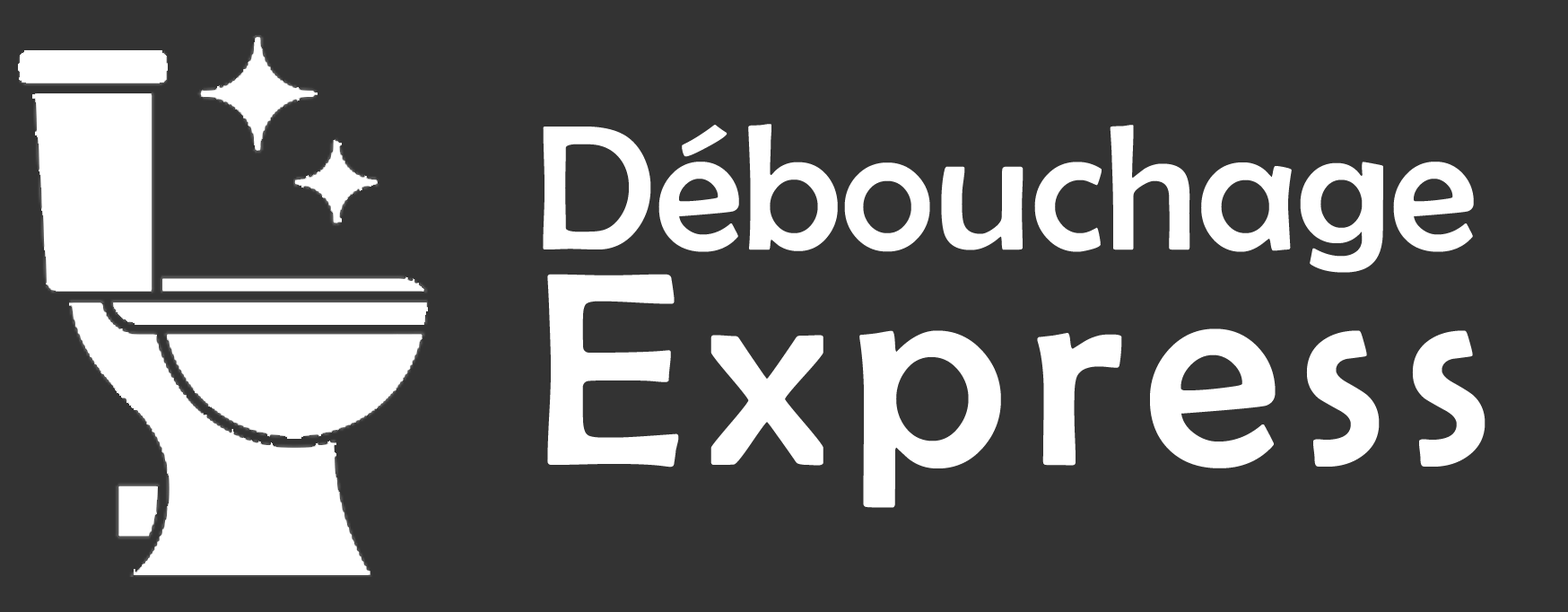
<style>
.page{position:relative;width:1568px;height:612px;background:#333333}
.page>*{position:absolute;margin:0}
.t1{font:179.4px "BerlinSansFB-Reg";color:#ffffff}
.t2{font:278.1px "BerlinSansFB-Reg";letter-spacing:0.075em;color:#ffffff}
</style>
<div class="page">
<p class="t1" style="left:543px;top:124px;width:942px;height:384px">Débouchage<br><span class="t2">Express</span></p>
</div>
